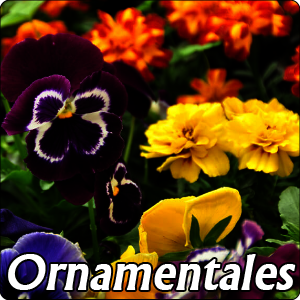
<style>
.page{position:relative;width:300px;height:300px}
.page>*{position:absolute;margin:0}
.t1{font:50.7px "Narkisim";color:#ffffff;font-weight:bold;font-style:italic}
</style>
<div class="page">
<p class="t1" style="left:8px;top:254px;width:288px;height:36px">Ornamentales</p>
</div>
